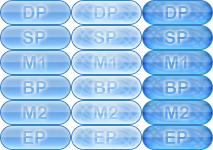
<style>
.page{position:relative;width:213px;height:150px}
.page>*{position:absolute;margin:0}
.t1{font:18px "ArialRoundedMTBold"}
.t2{font:18px "ArialRoundedMTBold";color:#a0c9ee}
.t3{font:18px "ArialRoundedMTBold";color:#88bae8}
.t4{font:18px "ArialRoundedMTBold";color:#9ec9ed}
.t5{font:18px "ArialRoundedMTBold";color:#6aa7e3}
.t6{font:18px "ArialRoundedMTBold";color:#9ec7ee}
.t7{font:18px "ArialRoundedMTBold";color:#88bae9}
.t8{font:18px "ArialRoundedMTBold";color:#9fc9ee}
.t9{font:18px "ArialRoundedMTBold";color:#6aa7e6}
.t10{font:18px "ArialRoundedMTBold";color:#81baeb}
.t11{font:18px "ArialRoundedMTBold";color:#9ecaee}
.t12{font:18px "ArialRoundedMTBold";color:#65a7e8}
.t13{font:18px "ArialRoundedMTBold";color:#a0caee}
</style>
<div class="page">
<p class="t1" style="left:23px;top:6px;width:24px;height:13px">DP</p>
<p class="t2" style="left:94px;top:6px;width:24px;height:13px">DP</p>
<p class="t1" style="left:165px;top:6px;width:24px;height:13px">DP</p>
<p class="t3" style="left:22px;top:31px;width:24px;height:13px">SP</p>
<p class="t4" style="left:93px;top:31px;width:24px;height:13px">SP</p>
<p class="t5" style="left:164px;top:31px;width:24px;height:13px">SP</p>
<p class="t1" style="left:23px;top:56px;width:22px;height:13px">M1</p>
<p class="t6" style="left:94px;top:56px;width:22px;height:13px">M1</p>
<p class="t1" style="left:165px;top:56px;width:22px;height:13px">M1</p>
<p class="t7" style="left:23px;top:81px;width:24px;height:13px">BP</p>
<p class="t8" style="left:94px;top:81px;width:24px;height:13px">BP</p>
<p class="t9" style="left:165px;top:81px;width:24px;height:13px">BP</p>
<p class="t10" style="left:23px;top:106px;width:24px;height:13px">M2</p>
<p class="t11" style="left:94px;top:106px;width:24px;height:13px">M2</p>
<p class="t12" style="left:165px;top:106px;width:24px;height:13px">M2</p>
<p class="t1" style="left:23px;top:131px;width:23px;height:13px">EP</p>
<p class="t13" style="left:94px;top:131px;width:23px;height:13px">EP</p>
<p class="t1" style="left:165px;top:131px;width:23px;height:13px">EP</p>
</div>
